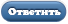
<style>
.page{position:relative;width:68px;height:24px;background:#ffffff}
.page>*{position:absolute;margin:0}
.t1{font:10px "AGCooper";color:#ffffff}
</style>
<div class="page">
<p class="t1" style="left:8px;top:8px;width:53px;height:7px">Ответить</p>
</div>
